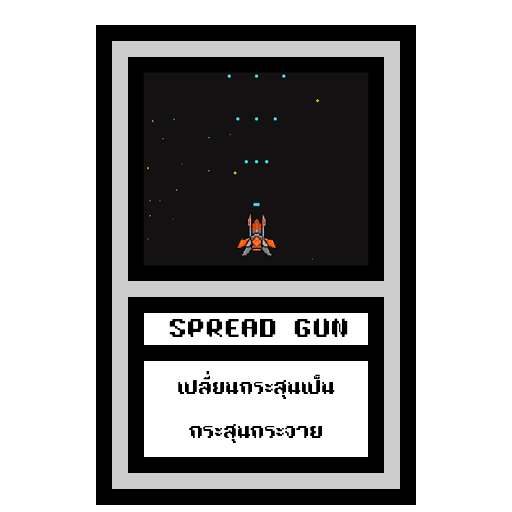
<style>
.page{position:relative;width:512px;height:512px;background:#ffffff}
.page>*{position:absolute;margin:0}
.t1{font:24px "TA16BIT-Regular";color:#000000}
.t2{font:18px "TA16BIT-Regular";color:#000000}
</style>
<div class="page">
<p class="t1" style="left:169px;top:318px;width:179px;height:19px">SPREAD GUN</p>
<p class="t2" style="left:178px;top:371px;width:157px;height:72px;text-align:center">เปลี่ยนกระสุนเป็น<br><br>กระสุนกระจาย</p>
</div>
